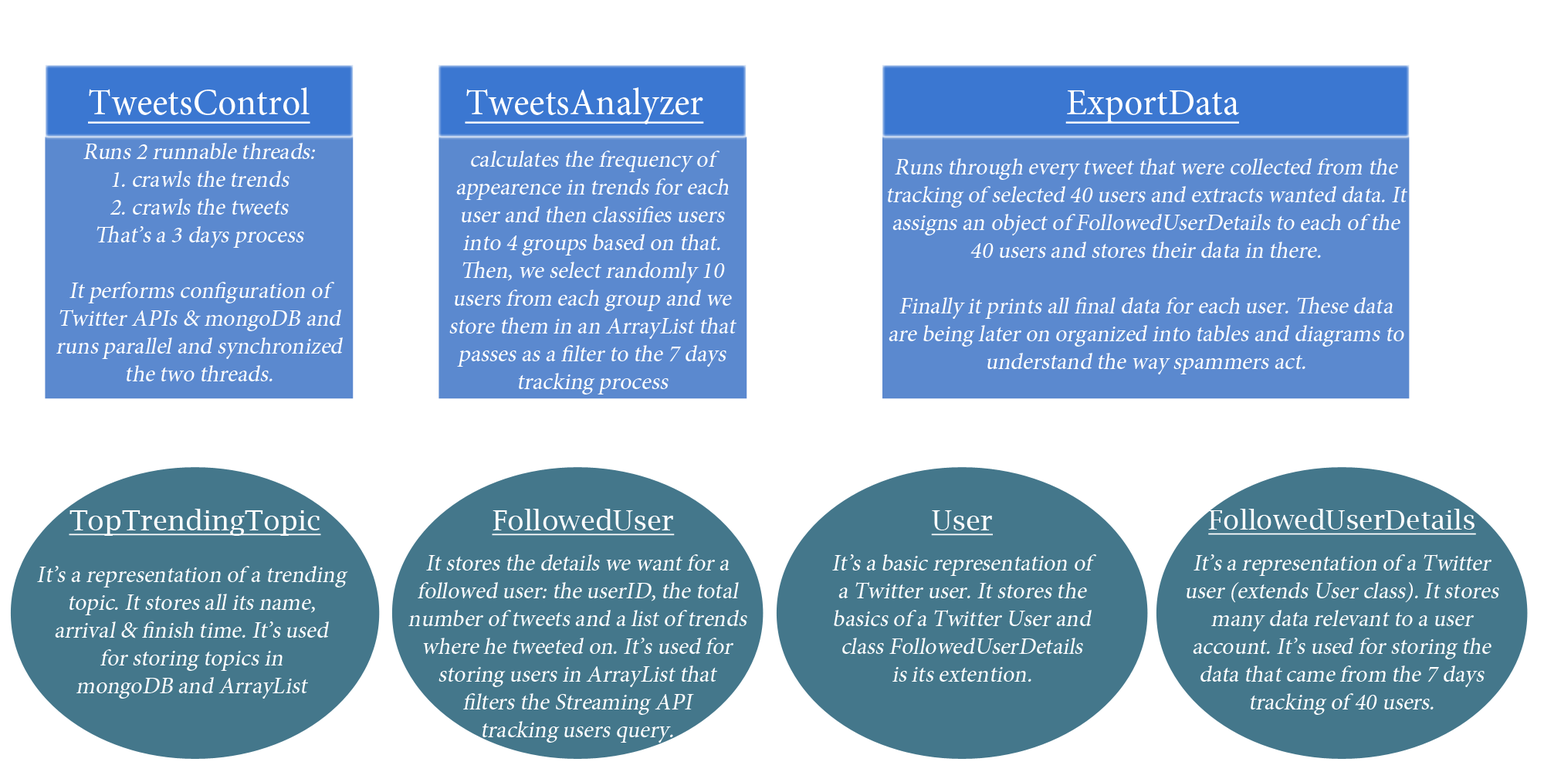
<style>
.page{position:relative;width:1544px;height:772px;background:#ffffff}
.page>*{position:absolute;margin:0}
.t1{font:37.1px "MinionPro-Regular";color:#ffffff;text-decoration:underline}
.t2{font:23.2px "MinionPro-Regular";color:#ffffff;font-style:italic}
.t3{font:27.8px "LucidaBright";color:#ffffff;text-decoration:underline}
.t4{font:27px "LucidaBright";color:#ffffff;text-decoration:underline}
</style>
<div class="page">
<p class="t1" style="left:88px;top:87px;width:222px;height:37px">TweetsControl</p>
<p class="t1" style="left:465px;top:87px;width:239px;height:37px">TweetsAnalyzer</p>
<p class="t1" style="left:1066px;top:90px;width:173px;height:34px">ExportData</p>
<p class="t2" style="left:56px;top:143px;width:287px;height:238px;text-align:center">Runs 2 runnable threads:<br>1. crawls the trends<br>2. crawls the tweets<br>That’s a 3 days process<br><br>It performs configuration of Twitter APIs &amp; mongoDB and runs parallel and synchronized <br>the two threads.</p>
<p class="t2" style="left:449px;top:151px;width:288px;height:244px;text-align:center">calculates the frequency of <br>appearence in trends for each <br>user and then classifies users<br>into 4 groups based on that. <br>Then, we select randomly 10 <br>users from each group and we store them in an ArrayList that passes as a filter to the 7 days tracking process</p>
<p class="t2" style="left:887px;top:158px;width:521px;height:216px;text-align:center">Runs through every tweet that were collected from the tracking of selected 40 users and extracts wanted data. It assigns an object of FollowedUserDetails to each of the 40 users and stores their data in there.<br><br>Finally it prints all final data for each user. These data are being later on organized into tables and diagrams to understand the way spammers act.</p>
<p class="t3" style="left:69px;top:509px;width:252px;height:27px">TopTrendingTopic</p>
<p class="t3" style="left:492px;top:509px;width:183px;height:27px">FollowedUser</p>
<p class="t4" style="left:1208px;top:509px;width:268px;height:26px">FollowedUserDetails</p>
<p class="t3" style="left:931px;top:510px;width:62px;height:26px">User</p>
<p class="t2" style="left:408px;top:554px;width:339px;height:189px;text-align:center">It stores the details we want for a followed user: the userID, the total number of tweets and a list of trends where he tweeted on. It’s used for storing users in ArrayList that <br>filters the Streaming API <br>tracking users query.</p>
<p class="t2" style="left:832px;top:554px;width:264px;height:128px;text-align:center">It’s a basic representation of <br>a Twitter user. It stores the <br>basics of a Twitter User and <br>class FollowedUserDetails <br>is its extention.</p>
<p class="t2" style="left:1187px;top:554px;width:313px;height:161px;text-align:center">It’s a representation of a Twitter user (extends User class). It stores many data relevant to a user account. It’s used for storing the data that came from the 7 days tracking of 40 users.</p>
<p class="t2" style="left:37px;top:566px;width:311px;height:133px;text-align:center">It’s a representation of a trending topic. It stores all its name, <br>arrival &amp; finish time. It’s used <br>for storing topics in <br>mongoDB and ArrayList</p>
</div>
